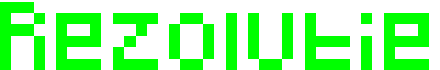
<style>
.page{position:relative;width:440px;height:70px;background:#ffffff}
.page>*{position:absolute;margin:0}
.t1{font:57px "Pixeled";color:#00ff00}
</style>
<div class="page">
<p class="t1" style="left:0px;top:2px;width:429px;height:68px">Rezolutie</p>
</div>
